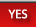
<style>
.page{position:relative;width:36px;height:27px}
.page>*{position:absolute;margin:0}
.t1{font:12.5px "MyriadPro-Regular";color:#ffffff}
</style>
<div class="page">
<p class="t1" style="left:8px;top:9px;width:20px;height:10px">YES</p>
</div>
